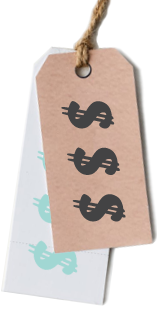
<style>
.page{position:relative;width:157px;height:329px;background:#ffffff}
.page>*{position:absolute;margin:0}
.t1{font:60.9px "ForteMT";letter-spacing:0.2em;color:#424243;text-transform:uppercase;font-weight:bold}
</style>
<div class="page">
<p class="t1" style="left:61px;top:101px;width:65px;height:121px;rotate:83deg">$$$</p>
</div>
